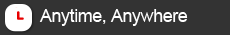
<style>
.page{position:relative;width:230px;height:35px;background:#333333}
.page>*{position:absolute;margin:0}
.t1{font:18px "ArialMT";letter-spacing:-0.025em;color:#ffffff}
</style>
<div class="page">
<p class="t1" style="left:39px;top:9px;width:149px;height:17px">Anytime, Anywhere</p>
</div>
